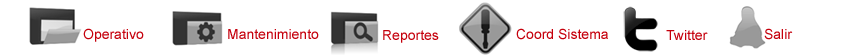
<style>
.page{position:relative;width:860px;height:55px;background:#ffffff}
.page>*{position:absolute;margin:0}
.t1{font:14px "ArialMT";color:#c5000c}
</style>
<div class="page">
<p class="t1" style="left:83px;top:28px;width:61px;height:14px">Operativo</p>
<p class="t1" style="left:228px;top:29px;width:91px;height:10px">Mantenimiento</p>
<p class="t1" style="left:383px;top:30px;width:56px;height:13px">Reportes</p>
<p class="t1" style="left:516px;top:28px;width:92px;height:12px">Coord Sistema</p>
<p class="t1" style="left:666px;top:30px;width:42px;height:10px">Twitter</p>
<p class="t1" style="left:764px;top:28px;width:29px;height:12px">Salir</p>
</div>
